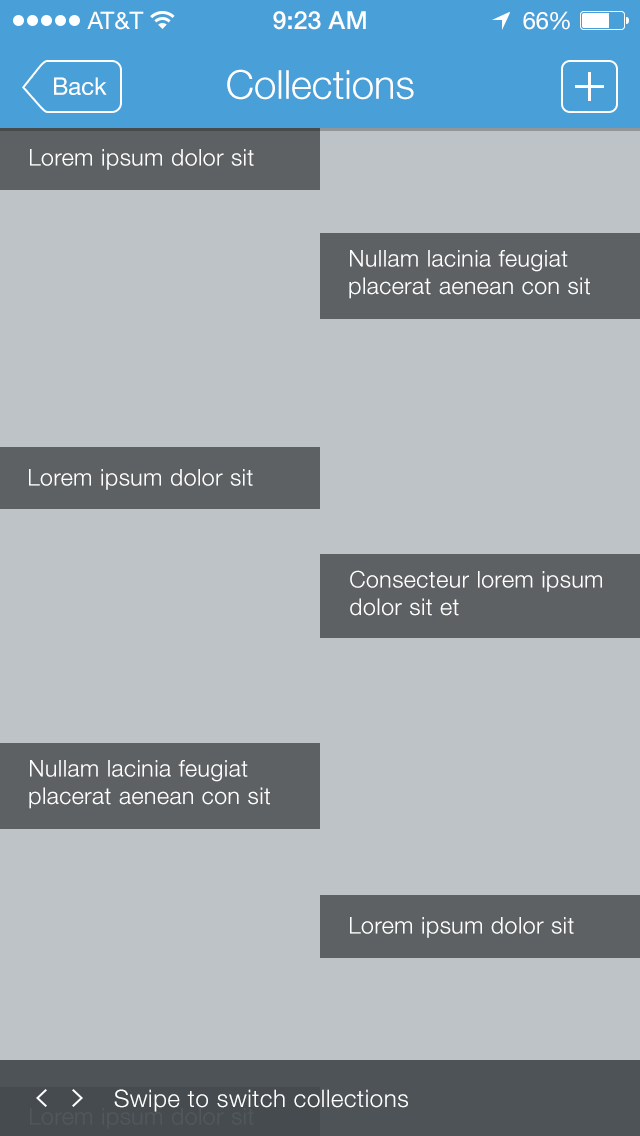
<style>
.page{position:relative;width:640px;height:1136px;background:#bdc3c7}
.page>*{position:absolute;margin:0}
.t1{font:24px "HelveticaNeue";color:#ffffff}
.t2{font:25px "HelveticaNeue-Medium";color:#ffffff}
.t3{font:24px "HelveticaNeue";letter-spacing:-0.02em;color:#ffffff}
.t4{font:40px "HelveticaNeue-Light";color:#ffffff}
.t5{font:23px "HelveticaNeue-Light";letter-spacing:0.025em;color:#ffffff}
.t6{font:24px "HelveticaNeue-Light";letter-spacing:0.025em;color:#ffffff}
.t7{font:23px "HelveticaNeue-Light";letter-spacing:0.025em;color:#52575a}
</style>
<div class="page">
<p class="t1" style="left:87px;top:11px;width:57px;height:19px">AT&amp;T</p>
<p class="t2" style="left:273px;top:11px;width:93px;height:19px">9:23 AM</p>
<p class="t1" style="left:523px;top:11px;width:47px;height:19px">6<span class="t3">6</span>%</p>
<p class="t1" style="left:54px;top:77px;width:53px;height:18px">Back</p>
<p class="t4" style="left:227px;top:69px;width:187px;height:31px">Collections</p>
<p class="t5" style="left:30px;top:149px;width:224px;height:21px">Lorem ipsum dolor sit</p>
<p class="t5" style="left:349px;top:250px;width:241px;height:49px">Nullam lacinia feugiat<br>placerat aenean con sit</p>
<p class="t5" style="left:29px;top:469px;width:224px;height:21px">Lorem ipsum dolor sit</p>
<p class="t5" style="left:350px;top:570px;width:252px;height:46px">Consecteur lorem ipsum<br>dolor sit et</p>
<p class="t5" style="left:29px;top:760px;width:241px;height:49px">Nullam lacinia feugiat<br>placerat aenean con sit</p>
<p class="t5" style="left:350px;top:917px;width:224px;height:21px">Lorem ipsum dolor sit</p>
<p class="t6" style="left:114px;top:1089px;width:294px;height:23px">Swipe to switch collections</p>
<p class="t7" style="left:30px;top:1108px;width:224px;height:21px">Lorem ipsum dolor sit</p>
</div>
